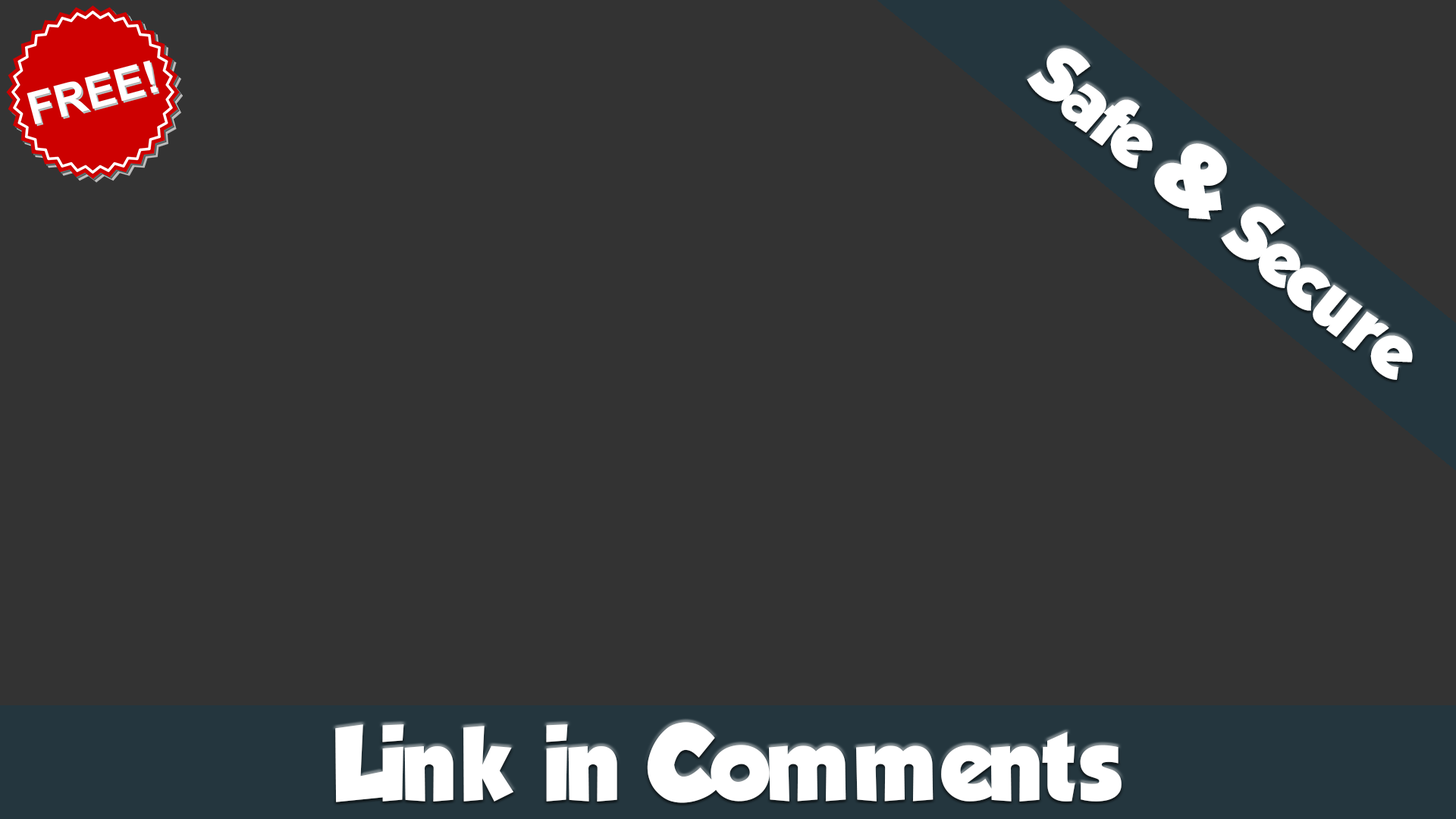
<style>
.page{position:relative;width:1456px;height:819px;background:#333333}
.page>*{position:absolute;margin:0}
.t1{font:83.4px "TadeoFont-Bold";color:#ffffff}
.t2{font:113.7px "TadeoFont-Bold";color:#ffffff}
</style>
<div class="page">
<p class="t1" style="left:1027px;top:48px;width:386px;height:332px;rotate:39deg">Safe &amp; Secure</p>
<p class="t2" style="left:335px;top:722px;width:787px;height:81px">Link in Comments</p>
</div>
